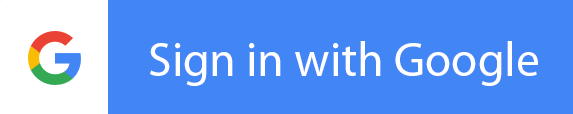
<style>
.page{position:relative;width:573px;height:114px;background:#4285f4}
.page>*{position:absolute;margin:0}
.t1{font:48px "MyriadPro-Regular";color:#ffffff}
</style>
<div class="page">
<p class="t1" style="left:150px;top:41px;width:388px;height:45px">Sign in with Google</p>
</div>
